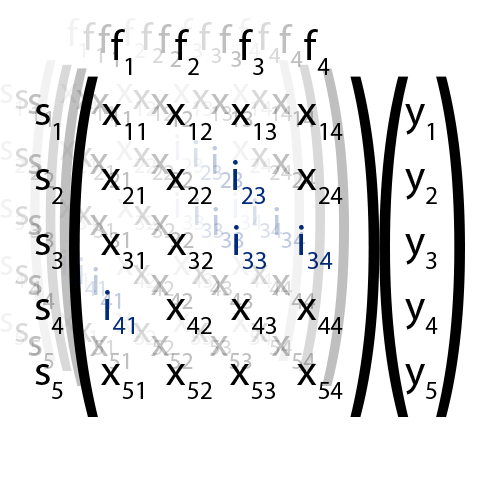
<style>
.page{position:relative;width:480px;height:480px;background:#ffffff}
.page>*{position:absolute;margin:0}
.t1{font:38.2px "MyriadPro-Regular";color:#f2f2f2}
.t2{font:38.2px "MyriadPro-Regular";color:#f2f2f2;font-variant:small-caps}
.t3{font:38.9px "MyriadPro-Regular";color:#d9d9d9}
.t4{font:38.9px "MyriadPro-Regular";color:#d9d9d9;font-variant:small-caps}
.t5{font:43.2px "MyriadPro-Regular";color:#000000}
.t6{font:43.2px "MyriadPro-Regular";color:#000000;font-variant:small-caps}
.t7{font:40.3px "MyriadPro-Regular";color:#bfbfbf}
.t8{font:40.3px "MyriadPro-Regular";color:#bfbfbf;font-variant:small-caps}
.t9{font:38.9px "MyriadPro-Regular";color:#d9dfeb;font-variant:small-caps}
.t10{font:38.9px "MyriadPro-Regular";color:#d9dfeb}
.t11{font:43.2px "MyriadPro-Regular";color:#032b7c;font-variant:small-caps}
.t12{font:43.2px "MyriadPro-Regular";color:#032b7c}
.t13{font:40.3px "MyriadPro-Regular";color:#c0cade}
.t14{font:38.9px "MyriadPro-Regular";color:#d4d4d4}
.t15{font:38.9px "MyriadPro-Regular";color:#d4d4d4;font-variant:small-caps}
.t16{font:40.3px "MyriadPro-Regular";color:#c0cade;font-variant:small-caps}
.t17{font:40.3px "MyriadPro-Regular";color:#bebebe;font-variant:small-caps}
.t18{font:40.3px "MyriadPro-Regular";color:#bebebe}
.t19{font:40.3px "MyriadPro-Regular";color:#bcbcbc}
.t20{font:40.3px "MyriadPro-Regular";color:#b5b5b5;font-variant:small-caps}
.t21{font:40.3px "MyriadPro-Regular";color:#b5b5b5}
</style>
<div class="page">
<p class="t1" style="left:67px;top:18px;width:19px;height:40px">f<span class="t2">1</span></p>
<p class="t3" style="left:83px;top:22px;width:19px;height:41px">f<span class="t4">1</span></p>
<p class="t5" style="left:111px;top:29px;width:21px;height:46px">f<span class="t6">1</span></p>
<p class="t3" style="left:141px;top:22px;width:22px;height:41px">f2</p>
<p class="t5" style="left:175px;top:29px;width:24px;height:46px">f2</p>
<p class="t3" style="left:199px;top:22px;width:22px;height:41px">f<span class="t4">3</span></p>
<p class="t7" style="left:219px;top:24px;width:22px;height:43px">f<span class="t8">3</span></p>
<p class="t5" style="left:239px;top:29px;width:25px;height:46px">f<span class="t6">3</span></p>
<p class="t3" style="left:258px;top:22px;width:23px;height:41px">f<span class="t4">4</span></p>
<p class="t7" style="left:279px;top:24px;width:24px;height:43px">f<span class="t8">4</span></p>
<p class="t5" style="left:304px;top:29px;width:26px;height:46px">f<span class="t6">4</span></p>
<p class="t1" style="left:0px;top:84px;width:22px;height:32px">s<span class="t2">1</span></p>
<p class="t3" style="left:15px;top:90px;width:22px;height:31px">s<span class="t4">1</span></p>
<p class="t4" style="left:192px;top:90px;width:40px;height:31px"><span class="t3">x</span>13</p>
<p class="t4" style="left:251px;top:90px;width:41px;height:31px"><span class="t3">x</span>14</p>
<p class="t5" style="left:35px;top:104px;width:25px;height:36px">s<span class="t6">1</span></p>
<p class="t6" style="left:102px;top:104px;width:42px;height:36px"><span class="t5">x</span>11</p>
<p class="t6" style="left:166px;top:104px;width:46px;height:36px"><span class="t5">x</span>12</p>
<p class="t6" style="left:231px;top:104px;width:45px;height:36px"><span class="t5">x</span>13</p>
<p class="t6" style="left:297px;top:104px;width:46px;height:36px"><span class="t5">x</span>14</p>
<p class="t5" style="left:405px;top:104px;width:29px;height:36px">y<span class="t6">1</span></p>
<p class="t9" style="left:193px;top:140px;width:29px;height:40px"><span class="t10">i</span>23</p>
<p class="t4" style="left:251px;top:148px;width:41px;height:32px"><span class="t3">x</span>24</p>
<p class="t8" style="left:90px;top:154px;width:39px;height:34px"><span class="t7">x</span>21</p>
<p class="t11" style="left:233px;top:160px;width:32px;height:44px"><span class="t12">i</span>23</p>
<p class="t8" style="left:272px;top:154px;width:44px;height:34px"><span class="t7">x</span>24</p>
<p class="t5" style="left:35px;top:169px;width:28px;height:35px">s<span class="t6">2</span></p>
<p class="t6" style="left:101px;top:169px;width:42px;height:35px"><span class="t5">x</span>21</p>
<p class="t6" style="left:166px;top:169px;width:46px;height:35px"><span class="t5">x</span>22</p>
<p class="t6" style="left:297px;top:169px;width:46px;height:35px"><span class="t5">x</span>24</p>
<p class="t5" style="left:405px;top:169px;width:32px;height:35px">y<span class="t6">2</span></p>
<p class="t1" style="left:0px;top:199px;width:25px;height:31px">s<span class="t2">3</span></p>
<p class="t3" style="left:15px;top:206px;width:25px;height:32px">s<span class="t4">3</span></p>
<p class="t4" style="left:134px;top:206px;width:41px;height:32px"><span class="t3">x</span>32</p>
<p class="t13" style="left:274px;top:207px;width:32px;height:41px">i34</p>
<p class="t8" style="left:90px;top:215px;width:39px;height:33px"><span class="t7">x</span>31</p>
<p class="t8" style="left:151px;top:215px;width:43px;height:33px"><span class="t7">x</span>32</p>
<p class="t11" style="left:234px;top:225px;width:32px;height:44px"><span class="t12">i</span>33</p>
<p class="t12" style="left:299px;top:225px;width:34px;height:44px">i34</p>
<p class="t5" style="left:35px;top:234px;width:28px;height:35px">s<span class="t6">3</span></p>
<p class="t6" style="left:101px;top:234px;width:42px;height:35px"><span class="t5">x</span>31</p>
<p class="t6" style="left:167px;top:234px;width:46px;height:35px"><span class="t5">x</span>32</p>
<p class="t5" style="left:405px;top:234px;width:32px;height:35px">y<span class="t6">3</span></p>
<p class="t1" style="left:0px;top:256px;width:26px;height:32px">s<span class="t2">4</span></p>
<p class="t14" style="left:15px;top:265px;width:26px;height:31px">s<span class="t15">4</span></p>
<p class="t16" style="left:93px;top:267px;width:28px;height:42px"><span class="t13">i</span>41</p>
<p class="t4" style="left:133px;top:265px;width:41px;height:31px"><span class="t3">x</span>42</p>
<p class="t4" style="left:192px;top:265px;width:40px;height:31px"><span class="t3">x</span>43</p>
<p class="t4" style="left:251px;top:265px;width:41px;height:31px"><span class="t3">x</span>44</p>
<p class="t8" style="left:151px;top:275px;width:42px;height:34px"><span class="t7">x</span>42</p>
<p class="t8" style="left:211px;top:275px;width:42px;height:34px"><span class="t7">x</span>43</p>
<p class="t17" style="left:272px;top:275px;width:44px;height:34px"><span class="t18">x</span>44</p>
<p class="t11" style="left:105px;top:290px;width:29px;height:44px"><span class="t12">i</span>41</p>
<p class="t5" style="left:35px;top:299px;width:29px;height:35px">s<span class="t6">4</span></p>
<p class="t6" style="left:166px;top:299px;width:46px;height:35px"><span class="t5">x</span>42</p>
<p class="t6" style="left:231px;top:299px;width:45px;height:35px"><span class="t5">x</span>43</p>
<p class="t6" style="left:297px;top:299px;width:46px;height:35px"><span class="t5">x</span>44</p>
<p class="t5" style="left:405px;top:299px;width:33px;height:35px">y<span class="t6">4</span></p>
<p class="t1" style="left:0px;top:313px;width:25px;height:32px">s5</p>
<p class="t3" style="left:15px;top:323px;width:25px;height:32px">s5</p>
<p class="t4" style="left:133px;top:323px;width:41px;height:32px"><span class="t3">x</span>52</p>
<p class="t19" style="left:28px;top:336px;width:26px;height:33px">s5</p>
<p class="t8" style="left:90px;top:336px;width:39px;height:33px"><span class="t7">x</span>51</p>
<p class="t8" style="left:151px;top:336px;width:42px;height:33px"><span class="t7">x</span>52</p>
<p class="t8" style="left:210px;top:336px;width:42px;height:33px"><span class="t7">x</span>53</p>
<p class="t20" style="left:272px;top:336px;width:44px;height:33px"><span class="t21">x</span>54</p>
<p class="t5" style="left:35px;top:364px;width:28px;height:35px">s5</p>
<p class="t6" style="left:101px;top:364px;width:42px;height:35px"><span class="t5">x</span>51</p>
<p class="t6" style="left:166px;top:364px;width:46px;height:35px"><span class="t5">x</span>52</p>
<p class="t6" style="left:230px;top:364px;width:45px;height:35px"><span class="t5">x</span>53</p>
<p class="t6" style="left:297px;top:364px;width:46px;height:35px"><span class="t5">x</span>54</p>
<p class="t5" style="left:405px;top:364px;width:32px;height:35px">y<span class="t6">5</span></p>
</div>
